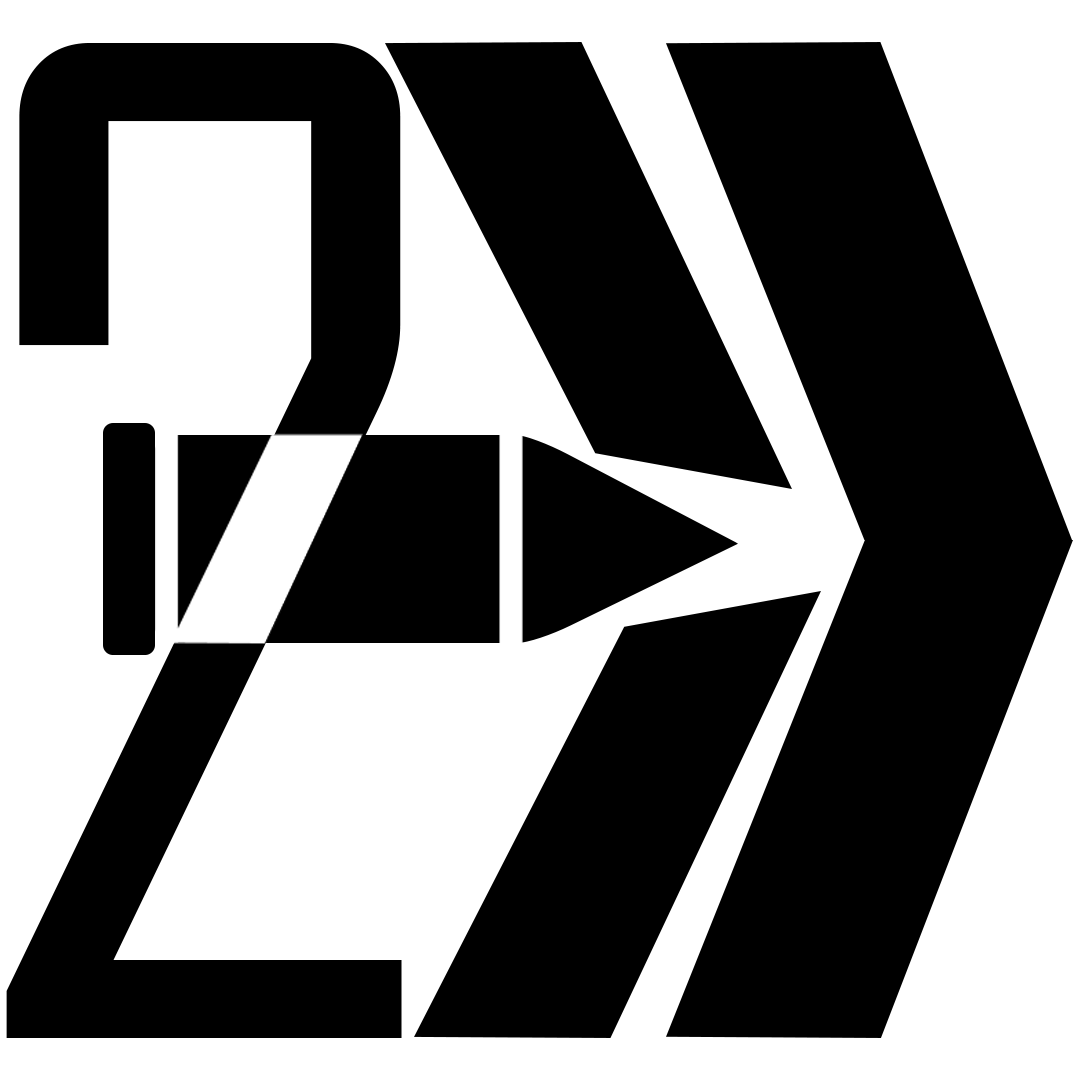
<style>
.page{position:relative;width:1080px;height:1080px;background:#000000}
.page>*{position:absolute;margin:0}
.t1{font:1302.2px "AgencyFB-Reg";color:#000000}
</style>
<div class="page">
<p class="t1" style="left:6px;top:43px;width:396px;height:995px">2</p>
</div>
